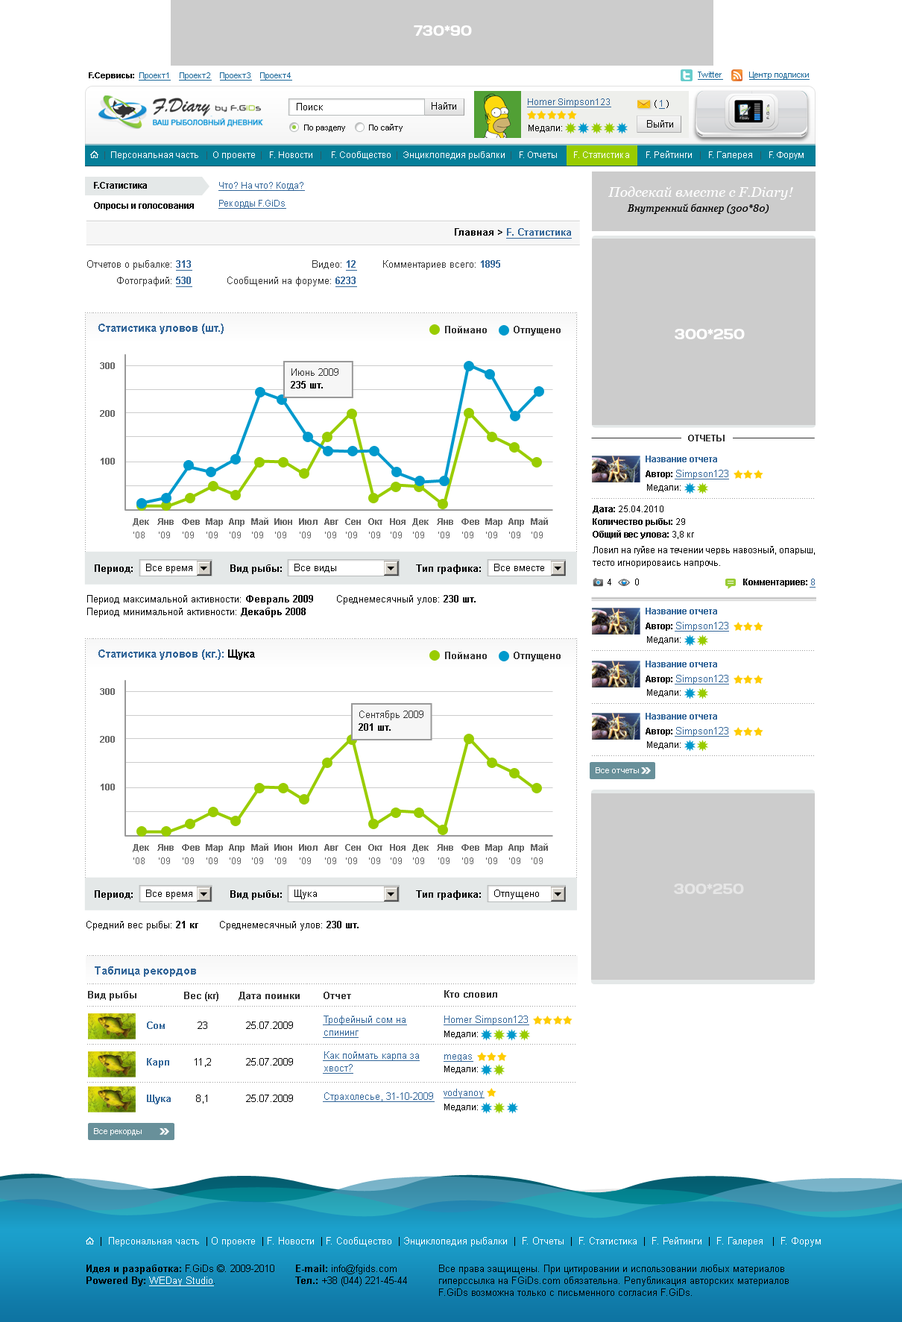
<style>
.page{position:relative;width:902px;height:1322px;background:#ffffff}
.page>*{position:absolute;margin:0}
.t1{font:8.9px/20.1px "Arial-BoldMT";color:#000000}
.t2{font:8.9px/17.9px "ArialMT";color:#336699;text-decoration:underline}
.t3{font:9.7px "Arial-BoldMT";color:#336699;text-decoration:underline}
.t4{font:9.7px "Arial-BoldMT";color:#000000}
.t5{font:9.7px/16.4px "ArialMT";color:#333333}
.t6{font:9.7px/16.4px "Arial-BoldMT";color:#336699;text-decoration:underline}
.t7{font:9.7px "ArialMT";color:#333333}
.t8{font:9.7px "Arial-BoldMT";color:#336699}
.t9{font:11.2px "Arial-BoldMT";color:#336699}
.t10{font:9.7px "Arial-BoldMT";color:#333333}
.t11{font:8.9px/23.9px "Arial-BoldMT";color:#666666}
.t12{font:9.7px/12.7px "ArialMT";color:#333333}
.t13{font:9.7px/12.7px "Arial-BoldMT";color:#000000}
.t14{font:8.9px/13.4px "Arial-BoldMT";color:#666666}
.t15{font:8.9px/13.4px "ArialMT";color:#666666}
.t16{font:9.7px "ArialMT";color:#000000}
.t17{font:9.7px/12.7px "ArialMT";color:#000000}
.t18{font:11.2px "Arial-BoldMT";color:#010101}
.t19{font:9.7px/36.5px "Arial-BoldMT";color:#336699}
.t20{font:9.7px/36.5px "ArialMT";color:#000000}
.t21{font:9.7px/12.7px "ArialMT";color:#336699;text-decoration:underline}
.t22{font:9.7px/36.5px "ArialMT";color:#336699;text-decoration:underline}
.t23{font:8.9px "ArialMT";color:#000000}
.t24{font:9.7px "ArialMT";color:#336699;text-decoration:underline}
.t25{font:8.2px "ArialMT";color:#ffffff}
.t26{font:9.7px "ArialMT";color:#ffffff}
.t27{font:9.7px "ArialMT";color:#ffffff;text-decoration:underline}
</style>
<div class="page">
<p class="t1" style="left:94px;top:182px;width:100px;height:28px">F.Статистика<br>Опросы и голосования</p>
<p class="t2" style="left:218px;top:182px;width:87px;height:27px">Что? На что? Когда?<br>Рекорды F.GiDs</p>
<p class="t3" style="left:455px;top:228px;width:117px;height:11px"><span class="t4">Главная &gt; </span>F. Статистика</p>
<p class="t5" style="left:87px;top:260px;width:105px;height:27px;text-align:right">Отчетов о рыбалке: <span class="t6">313<br></span>Фотографий: <span class="t6">530</span></p>
<p class="t5" style="left:227px;top:260px;width:130px;height:27px;text-align:right">Видео: <span class="t6">12<br></span>Сообщений на форуме: <span class="t6">6233</span></p>
<p class="t7" style="left:383px;top:260px;width:117px;height:10px">Комментариев всего: <span class="t8">1895</span></p>
<p class="t9" style="left:98px;top:324px;width:126px;height:10px">Статистика уловов (шт.)</p>
<p class="t10" style="left:445px;top:326px;width:42px;height:7px">Поймано</p>
<p class="t10" style="left:514px;top:326px;width:47px;height:9px">Отпущено</p>
<p class="t11" style="left:100px;top:362px;width:15px;height:102px;text-align:right">300<br><br>200<br><br>100<br><br>0</p>
<p class="t12" style="left:291px;top:368px;width:47px;height:20px">Июнь 2009<br><span class="t13">235 шт.</span></p>
<p class="t14" style="left:133px;top:518px;width:16px;height:20px">Дек<br><span class="t15">‘08</span></p>
<p class="t14" style="left:157px;top:518px;width:17px;height:20px">Янв <span class="t15">‘09</span></p>
<p class="t14" style="left:182px;top:518px;width:18px;height:20px">Фев<br><span class="t15">‘09</span></p>
<p class="t14" style="left:206px;top:518px;width:17px;height:20px">Мар<br><span class="t15">‘09</span></p>
<p class="t14" style="left:229px;top:518px;width:16px;height:20px">Апр<br><span class="t15">‘09</span></p>
<p class="t14" style="left:251px;top:517px;width:17px;height:21px">Май<br><span class="t15">‘09</span></p>
<p class="t14" style="left:274px;top:518px;width:18px;height:20px">Июн<br><span class="t15">‘09</span></p>
<p class="t14" style="left:299px;top:518px;width:19px;height:20px">Июл<br><span class="t15">‘09</span></p>
<p class="t14" style="left:324px;top:518px;width:14px;height:20px">Авг<br><span class="t15">‘09</span></p>
<p class="t14" style="left:345px;top:518px;width:16px;height:20px">Сен<br><span class="t15">‘09</span></p>
<p class="t14" style="left:368px;top:518px;width:14px;height:20px">Окт<br><span class="t15">‘09</span></p>
<p class="t14" style="left:390px;top:518px;width:16px;height:20px">Ноя<br><span class="t15">‘09</span></p>
<p class="t14" style="left:412px;top:518px;width:17px;height:20px">Дек<br><span class="t15">‘09</span></p>
<p class="t14" style="left:437px;top:518px;width:16px;height:20px">Янв <span class="t15">‘09</span></p>
<p class="t14" style="left:461px;top:518px;width:18px;height:20px">Фев<br><span class="t15">‘09</span></p>
<p class="t14" style="left:485px;top:518px;width:17px;height:20px">Мар<br><span class="t15">‘09</span></p>
<p class="t14" style="left:508px;top:518px;width:16px;height:20px">Апр<br><span class="t15">‘09</span></p>
<p class="t14" style="left:531px;top:517px;width:17px;height:21px">Май<br><span class="t15">‘09</span></p>
<p class="t4" style="left:95px;top:564px;width:38px;height:10px">Период:</p>
<p class="t16" style="left:146px;top:564px;width:46px;height:9px">Все время</p>
<p class="t4" style="left:230px;top:564px;width:52px;height:10px">Вид рыбы:</p>
<p class="t16" style="left:294px;top:564px;width:42px;height:9px">Все виды</p>
<p class="t4" style="left:416px;top:564px;width:65px;height:10px">Тип графика:</p>
<p class="t16" style="left:494px;top:564px;width:50px;height:7px">Все вместе</p>
<p class="t17" style="left:87px;top:595px;width:226px;height:22px">Период максимальной активности: <span class="t13">Февраль 2009<br></span>Период минимальной активности: <span class="t13">Декабрь 2008</span></p>
<p class="t16" style="left:337px;top:595px;width:139px;height:10px">Среднемесячный улов: <span class="t4">230 шт.</span></p>
<p class="t9" style="left:98px;top:649px;width:157px;height:11px">Статистика уловов (кг.): <span class="t18">Щука</span></p>
<p class="t10" style="left:445px;top:652px;width:42px;height:7px">Поймано</p>
<p class="t10" style="left:514px;top:652px;width:47px;height:9px">Отпущено</p>
<p class="t11" style="left:100px;top:688px;width:15px;height:102px;text-align:right">300<br><br>200<br><br>100<br><br>0</p>
<p class="t12" style="left:359px;top:710px;width:64px;height:21px">Сентябрь 2009<br><span class="t13">201 шт.</span></p>
<p class="t14" style="left:133px;top:844px;width:16px;height:20px">Дек<br><span class="t15">‘08</span></p>
<p class="t14" style="left:157px;top:844px;width:17px;height:20px">Янв <span class="t15">‘09</span></p>
<p class="t14" style="left:182px;top:844px;width:18px;height:20px">Фев<br><span class="t15">‘09</span></p>
<p class="t14" style="left:206px;top:844px;width:17px;height:20px">Мар<br><span class="t15">‘09</span></p>
<p class="t14" style="left:229px;top:844px;width:16px;height:20px">Апр<br><span class="t15">‘09</span></p>
<p class="t14" style="left:251px;top:843px;width:17px;height:21px">Май<br><span class="t15">‘09</span></p>
<p class="t14" style="left:274px;top:844px;width:18px;height:20px">Июн<br><span class="t15">‘09</span></p>
<p class="t14" style="left:299px;top:844px;width:19px;height:20px">Июл<br><span class="t15">‘09</span></p>
<p class="t14" style="left:324px;top:844px;width:14px;height:20px">Авг<br><span class="t15">‘09</span></p>
<p class="t14" style="left:345px;top:844px;width:16px;height:20px">Сен<br><span class="t15">‘09</span></p>
<p class="t14" style="left:368px;top:844px;width:14px;height:20px">Окт<br><span class="t15">‘09</span></p>
<p class="t14" style="left:390px;top:844px;width:16px;height:20px">Ноя<br><span class="t15">‘09</span></p>
<p class="t14" style="left:412px;top:844px;width:17px;height:20px">Дек<br><span class="t15">‘09</span></p>
<p class="t14" style="left:437px;top:844px;width:16px;height:20px">Янв <span class="t15">‘09</span></p>
<p class="t14" style="left:461px;top:844px;width:18px;height:20px">Фев<br><span class="t15">‘09</span></p>
<p class="t14" style="left:485px;top:844px;width:17px;height:20px">Мар<br><span class="t15">‘09</span></p>
<p class="t14" style="left:508px;top:844px;width:16px;height:20px">Апр<br><span class="t15">‘09</span></p>
<p class="t14" style="left:531px;top:843px;width:17px;height:21px">Май<br><span class="t15">‘09</span></p>
<p class="t4" style="left:95px;top:890px;width:38px;height:10px">Период:</p>
<p class="t16" style="left:146px;top:889px;width:46px;height:10px">Все время</p>
<p class="t4" style="left:230px;top:890px;width:52px;height:10px">Вид рыбы:</p>
<p class="t16" style="left:294px;top:889px;width:23px;height:10px">Щука</p>
<p class="t4" style="left:416px;top:890px;width:65px;height:10px">Тип графика:</p>
<p class="t16" style="left:494px;top:889px;width:45px;height:10px">Отпущено</p>
<p class="t16" style="left:86px;top:921px;width:112px;height:9px">Средний вес рыбы: <span class="t4">21 кг</span></p>
<p class="t16" style="left:220px;top:921px;width:139px;height:9px">Среднемесячный улов: <span class="t4">230 шт.</span></p>
<p class="t9" style="left:95px;top:966px;width:101px;height:11px">Таблица рекордов</p>
<p class="t10" style="left:88px;top:991px;width:48px;height:10px">Вид рыбы</p>
<p class="t10" style="left:184px;top:992px;width:34px;height:9px">Вес (кг)</p>
<p class="t10" style="left:239px;top:992px;width:61px;height:9px">Дата поимки</p>
<p class="t10" style="left:324px;top:992px;width:27px;height:7px">Отчет</p>
<p class="t10" style="left:444px;top:990px;width:53px;height:8px">Кто словил</p>
<p class="t19" style="left:147px;top:1021px;width:24px;height:83px">Сом<br>Карп<br>Щука</p>
<p class="t20" style="left:195px;top:1021px;width:16px;height:82px;text-align:center">23<br>11,2<br>8,1</p>
<p class="t20" style="left:246px;top:1021px;width:47px;height:81px;text-align:center">25.07.2009<br>25.07.2009<br>25.07.2009</p>
<p class="t21" style="left:323px;top:1015px;width:84px;height:23px">Трофейный сом на<br>спининг</p>
<p class="t22" style="left:444px;top:1015px;width:85px;height:83px">Homer Simpson123<br>megas<br>vodyanoy</p>
<p class="t23" style="left:444px;top:1030px;width:34px;height:9px">Медали:</p>
<p class="t21" style="left:323px;top:1051px;width:97px;height:23px">Как поймать карпа за<br>хвост?</p>
<p class="t23" style="left:444px;top:1065px;width:34px;height:9px">Медали:</p>
<p class="t24" style="left:323px;top:1092px;width:112px;height:10px">Страхолесье, 31-10-2009</p>
<p class="t23" style="left:444px;top:1103px;width:34px;height:9px">Медали:</p>
<p class="t25" style="left:94px;top:1128px;width:48px;height:7px">Все рекорды</p>
<p class="t26" style="left:101px;top:1237px;width:720px;height:10px"><span class="t16">|</span>  Персональная часть <span class="t16"> |</span> О проекте  <span class="t16">|</span> F. Новости  <span class="t16">|</span> F. Сообщество  <span class="t16">|</span> Энциклопедия рыбалки  <span class="t16">|</span>  F. Отчеты  <span class="t16">|</span>  F. Статистика  <span class="t16">|</span>  F. Рейтинги  <span class="t16">|</span>  F. Галерея   <span class="t16">|</span>  F. Форум</p>
<p class="t16" style="left:86px;top:1264px;width:188px;height:22px"><span class="t4">Идея и разработка:</span> F.GiDs ©. 2009-2010<br><span class="t4">Powered By: </span><span class="t27">WEDay Studio</span>.</p>
<p class="t16" style="left:295px;top:1264px;width:112px;height:22px"><span class="t4">E-mail: </span>info@fgids.com<br><span class="t4">Тел.:</span> +38 (044) 221-45-44</p>
<p class="t16" style="left:439px;top:1264px;width:350px;height:32px">Все права защищены. При цитировании и использовании любых материалов гиперссылка на FGiDs.com обязательна. Републикация авторских материалов F.GiDs возможна только с письменного согласия F.GiDs.</p>
</div>
